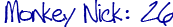
<style>
.page{position:relative;width:173px;height:27px;background:#ffffff}
.page>*{position:absolute;margin:0}
.t1{font:36px "TallPaul";color:#000099}
</style>
<div class="page">
<p class="t1" style="left:4px;top:0px;width:170px;height:29px">Monkey Nick: 26</p>
</div>
